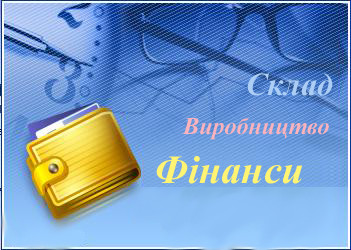
<style>
.page{position:relative;width:351px;height:250px}
.page>*{position:absolute;margin:0}
.t1{font:32px "TimesNewRomanPS-BoldItalicMT";color:#accef4}
.t2{font:24px "TimesNewRomanPS-BoldItalicMT";color:#fab2bd}
.t3{font:40px "TimesNewRomanPS-BoldItalicMT";color:#fff373}
</style>
<div class="page">
<p class="t1" style="left:247px;top:73px;width:86px;height:23px">Склад</p>
<p class="t2" style="left:182px;top:117px;width:147px;height:23px">Виробництво</p>
<p class="t3" style="left:156px;top:156px;width:147px;height:28px">Фінанси</p>
</div>
